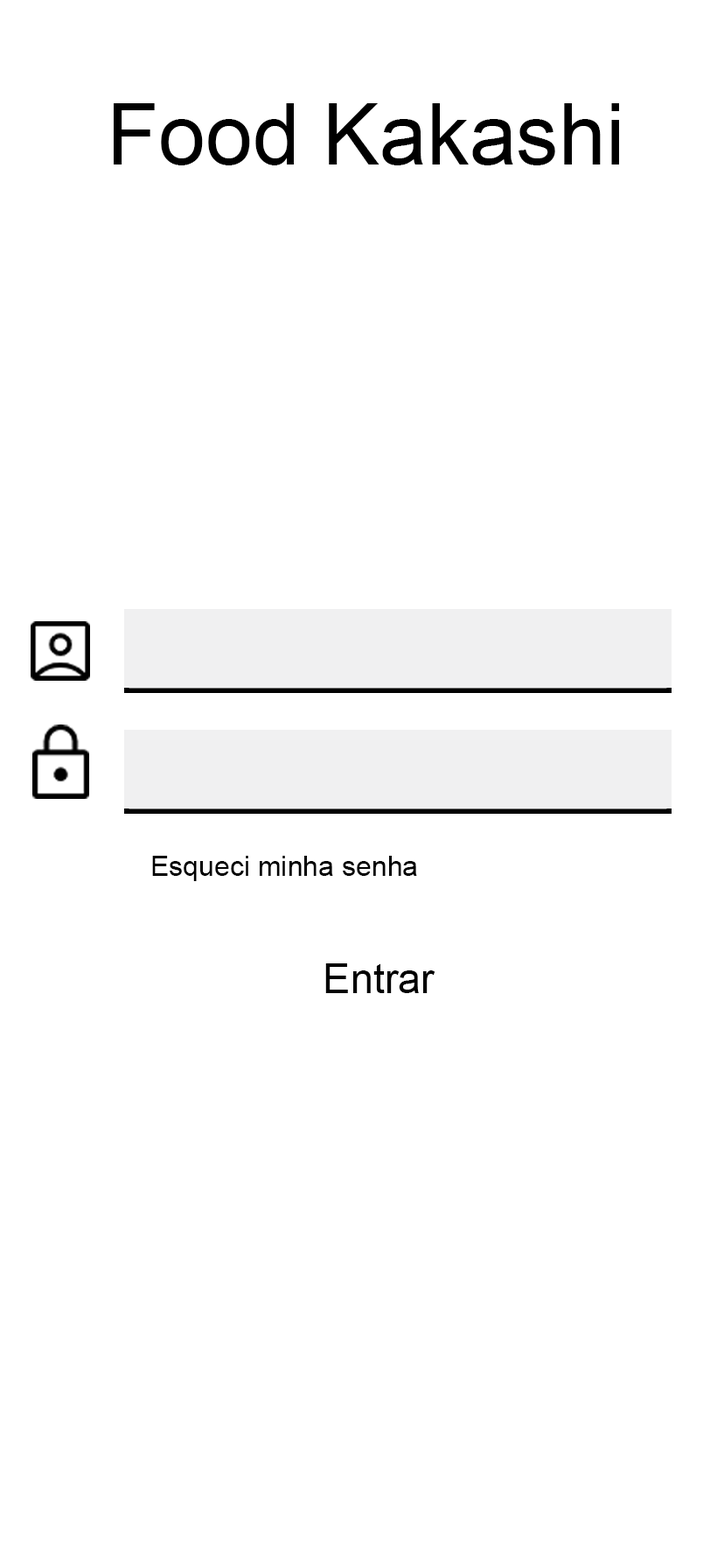
<style>
.page{position:relative;width:724px;height:1568px;background:#ffffff}
.page>*{position:absolute;margin:0}
.t1{font:84.6px "ArialMT";color:#000000}
.t2{font:28px "ArialMT";color:#000000}
.t3{font:40.9px "ArialMT";color:#000000}
</style>
<div class="page">
<p class="t1" style="left:114px;top:103px;width:506px;height:62px">Food Kakashi</p>
<p class="t2" style="left:152px;top:856px;width:265px;height:25px">Esqueci minha senha</p>
<p class="t3" style="left:326px;top:963px;width:110px;height:30px">Entrar</p>
</div>
